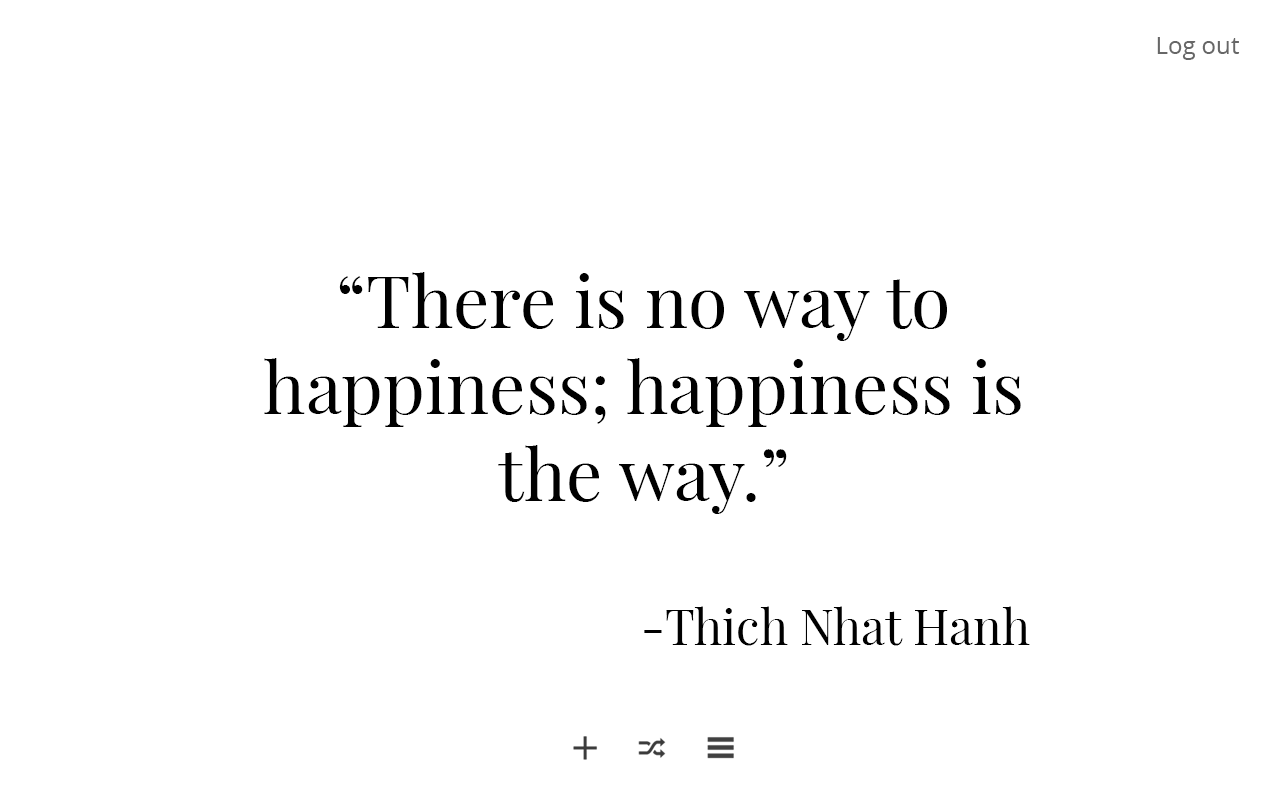
<style>
.page{position:relative;width:1280px;height:800px;background:#ffffff}
.page>*{position:absolute;margin:0}
.t1{font:24px "OpenSans";color:#676767}
.t2{font:72px "PlayfairDisplay-Regular";color:#000000}
.t3{font:48px "PlayfairDisplay-Regular";color:#000000}
</style>
<div class="page">
<p class="t1" style="left:1157px;top:37px;width:83px;height:23px">Log out</p>
<p class="t2" style="left:264px;top:272px;width:766px;height:374px;text-align:center">“There is no way to happiness; happiness is the way.”<br><br><span class="t3">-Thich Nhat Hanh</span></p>
</div>
